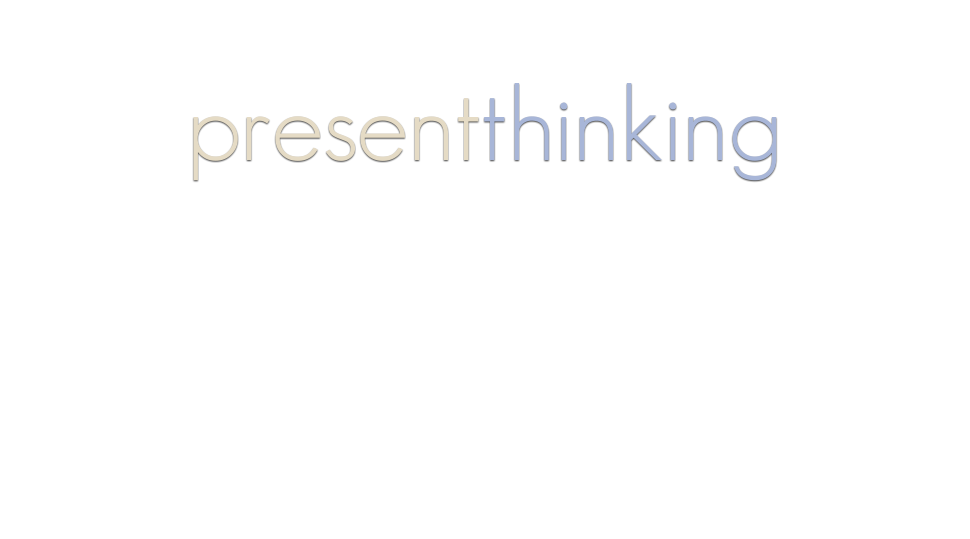
<style>
.page{position:relative;width:970px;height:539px;background:#ffffff}
.page>*{position:absolute;margin:0}
.t1{font:103.8px "GeosansLight";color:#a8b6d8}
.t2{font:103.8px "GeosansLight";color:#e5dbc5}
</style>
<div class="page">
<p class="t1" style="left:193px;top:83px;width:584px;height:98px"><span class="t2">present</span>thinking</p>
</div>
